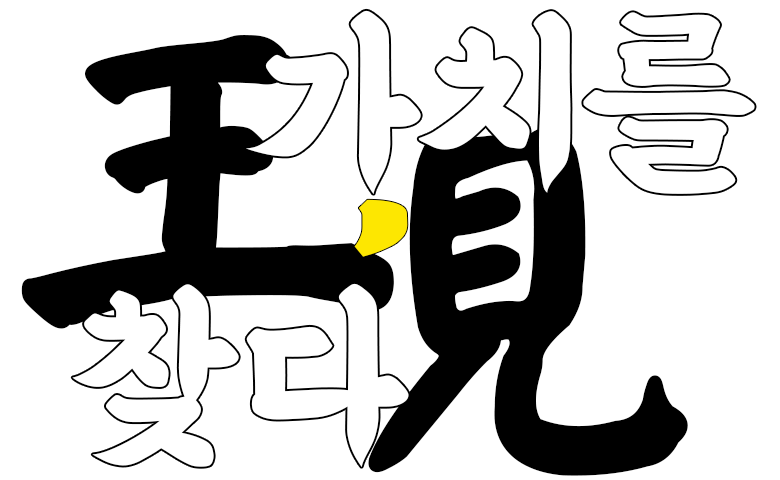
<style>
.page{position:relative;width:780px;height:480px;background:#ffffff}
.page>*{position:absolute;margin:0}
.t1{font:400px "MaShanZheng-Regular";color:#000000;font-weight:bold}
.t2{font:400px "ExpoM-HM";color:#000000;font-weight:bold}
.t3{font:400px "HanWangYanKai";color:#000000;font-weight:bold}
.t4{font:300px "MuseumClassicBold";color:#fde701}
.t5{font:200px "BMEULJIROTTF";color:#ffffff}
</style>
<div class="page">
<p class="t1" style="left:21px;top:35px;width:373px;height:294px"><span class="t2"> </span>王</p>
<p class="t3" style="left:368px;top:127px;width:320px;height:349px">見</p>
<p class="t4" style="left:354px;top:199px;width:54px;height:58px">,</p>
<p class="t5" style="left:72px;top:283px;width:337px;height:184px">찾다</p>
</div>
